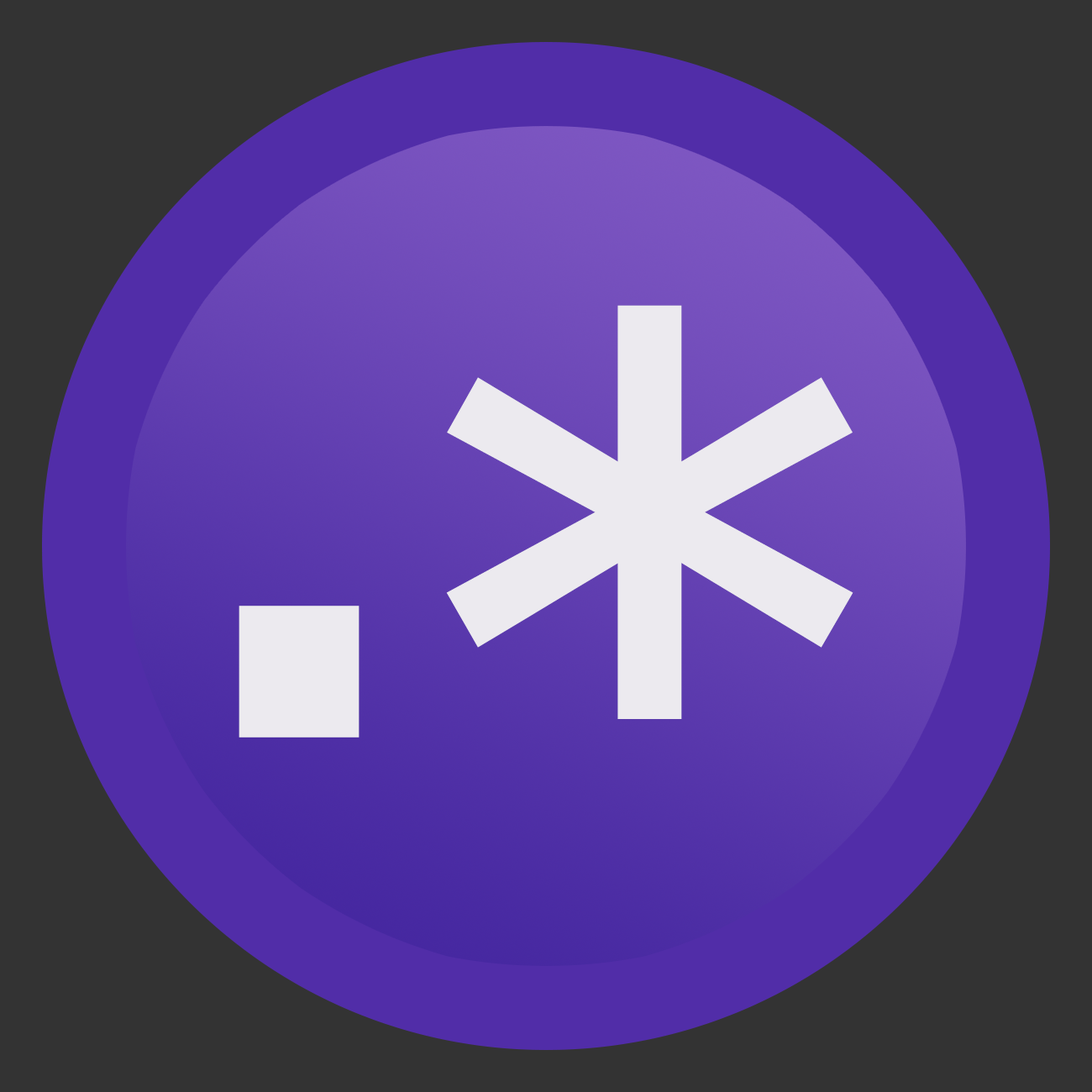
<style>
.page{position:relative;width:1092px;height:1092px;background:#333333}
.page>*{position:absolute;margin:0}
.t1{font:732.9px "Menlo-Bold";letter-spacing:-0.12em;color:#eceaef}
</style>
<div class="page">
<p class="t1" style="left:239px;top:305px;width:614px;height:433px">.*</p>
</div>
